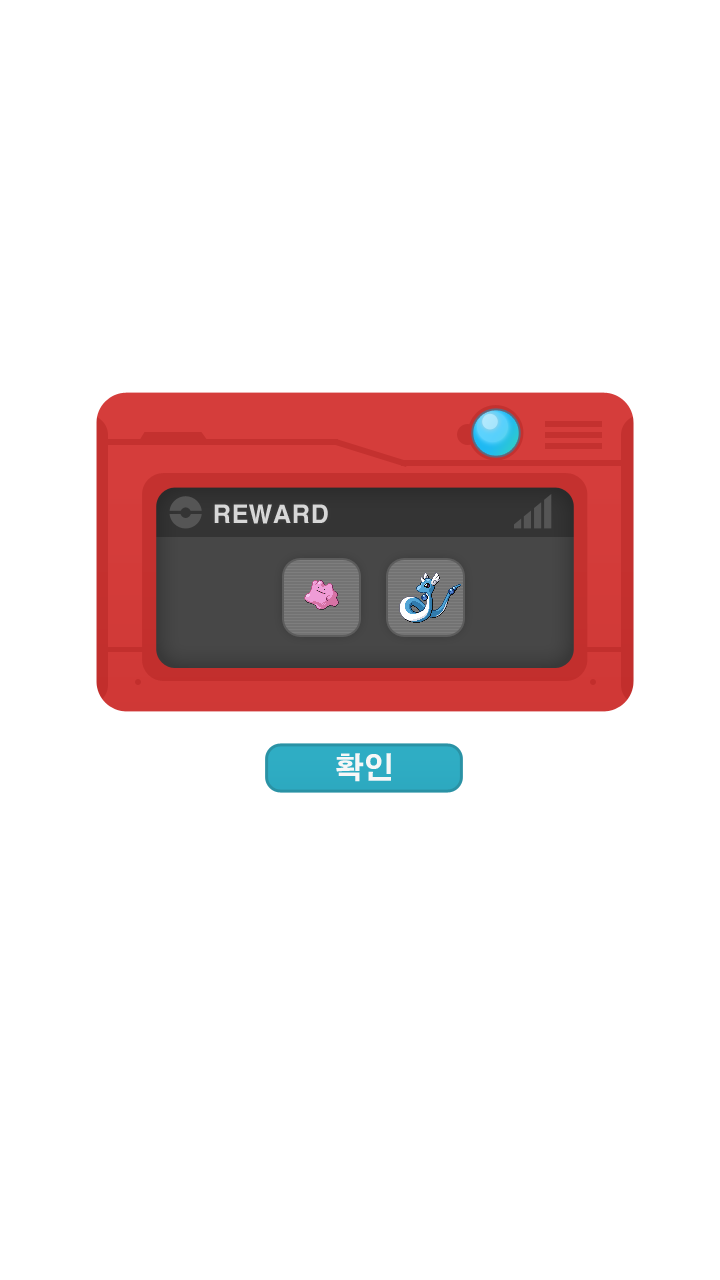
<style>
.page{position:relative;width:720px;height:1280px;background:#ffffff}
.page>*{position:absolute;margin:0}
.t1{font:24px "H2gtrE";color:#d7d7d7}
.t2{font:30px "H2gtrE";color:#f7f7f7}
</style>
<div class="page">
<p class="t1" style="left:214px;top:504px;width:114px;height:20px">REWARD</p>
<p class="t2" style="left:336px;top:753px;width:55px;height:29px">확인</p>
</div>
